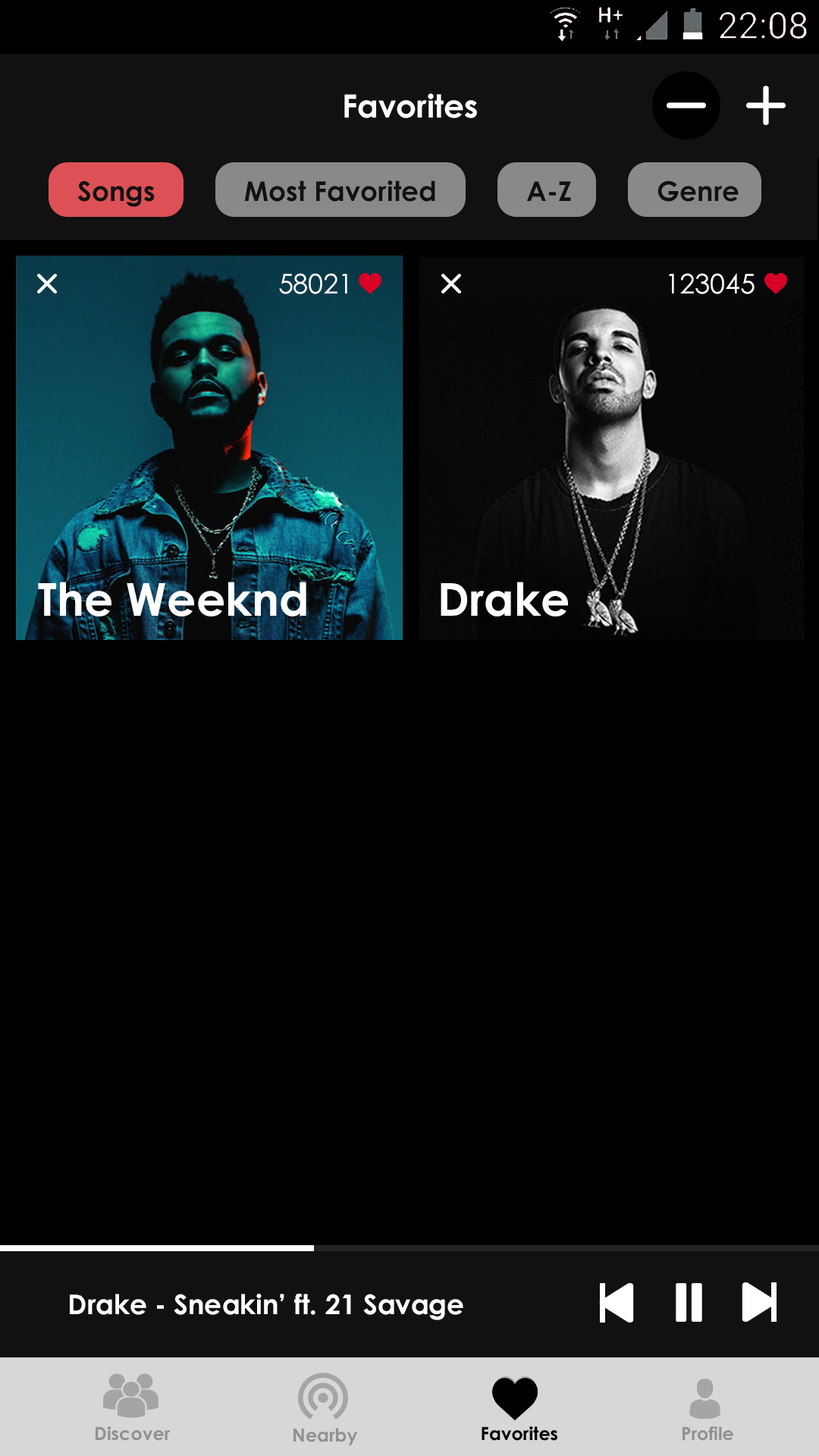
<style>
.page{position:relative;width:819px;height:1456px;background:#000000}
.page>*{position:absolute;margin:0}
.t1{font:31.8px "CenturyGothic-Bold";color:#ffffff}
.t2{font:27.3px "CenturyGothic-Bold";color:#111111}
.t3{font:27.3px "CenturyGothic";color:#ffffff}
.t4{font:45.5px "CenturyGothic-Bold";color:#fefefe}
.t5{font:45.5px "CenturyGothic-Bold";color:#ffffff}
.t6{font:27.3px "CenturyGothic-Bold";color:#ffffff}
.t7{font:18.2px "CenturyGothic-Bold";color:#919191}
.t8{font:18.2px "CenturyGothic-Bold";color:#010101}
</style>
<div class="page">
<p class="t1" style="left:344px;top:93px;width:133px;height:25px">Favorites</p>
<p class="t2" style="left:77px;top:180px;width:78px;height:27px">Songs</p>
<p class="t2" style="left:244px;top:180px;width:191px;height:22px">Most Favorited</p>
<p class="t2" style="left:527px;top:181px;width:44px;height:20px">A-Z</p>
<p class="t2" style="left:657px;top:180px;width:82px;height:22px">Genre</p>
<p class="t3" style="left:279px;top:273px;width:68px;height:21px">58021</p>
<p class="t3" style="left:669px;top:273px;width:86px;height:21px">123045</p>
<p class="t4" style="left:38px;top:582px;width:268px;height:35px">The Weeknd</p>
<p class="t5" style="left:441px;top:582px;width:127px;height:35px">Drake</p>
<p class="t6" style="left:70px;top:1294px;width:393px;height:26px">Drake - Sneakin’ ft. 21 Savage</p>
<p class="t7" style="left:96px;top:1426px;width:75px;height:15px">Discover</p>
<p class="t7" style="left:293px;top:1428px;width:65px;height:17px">Nearby</p>
<p class="t8" style="left:482px;top:1426px;width:75px;height:15px">Favorites</p>
<p class="t8" style="left:482px;top:1426px;width:75px;height:15px">Favorites</p>
<p class="t7" style="left:682px;top:1426px;width:51px;height:15px">Profile</p>
</div>
